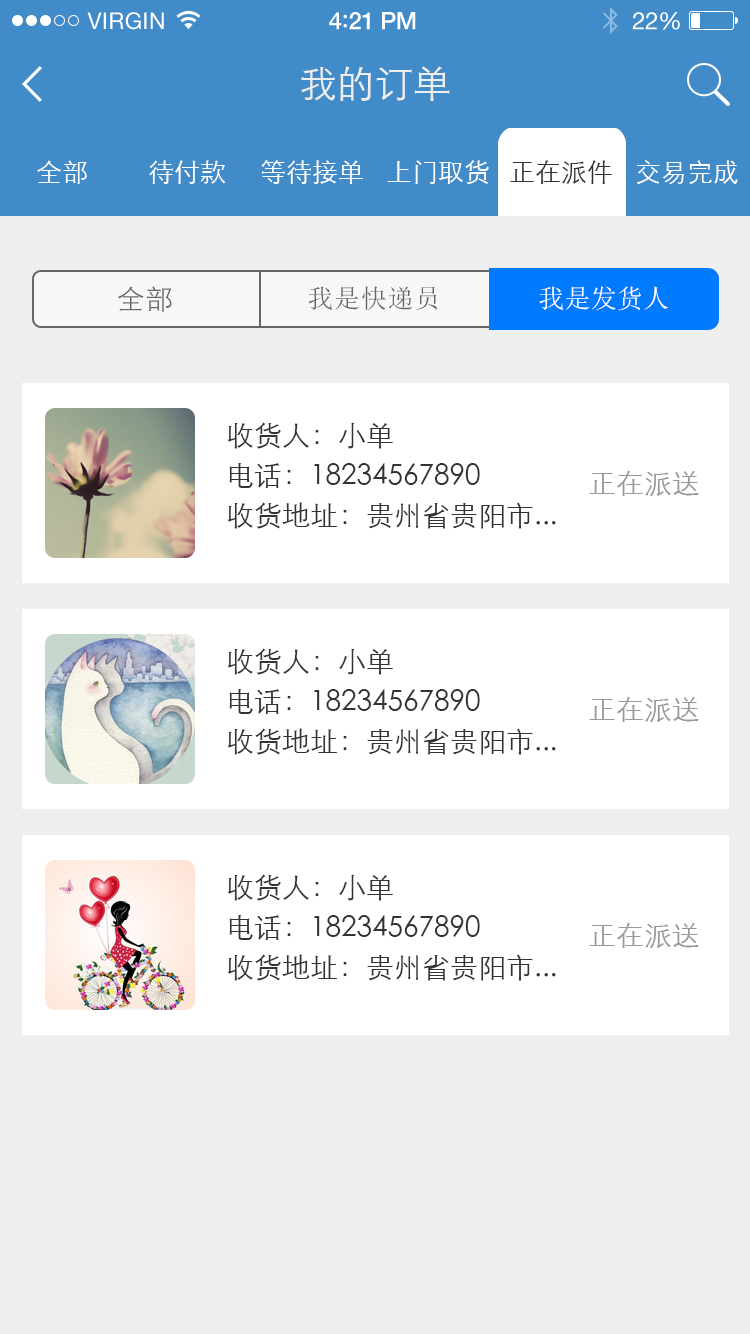
<style>
.page{position:relative;width:750px;height:1334px;background:#ffffff}
.page>*{position:absolute;margin:0}
.t1{font:23px "HelveticaNeue";letter-spacing:0.02em;color:#ffffff}
.t2{font:24px "HelveticaNeue-Medium";letter-spacing:-0.02em;color:#ffffff}
.t3{font:26px "Avenir-Medium";letter-spacing:-0.02em;color:#ffffff}
.t4{font:24px "HelveticaNeue";letter-spacing:-0.02em;color:#ffffff}
.t5{font:38px "STXihei";color:#eeeeee}
.t6{font:26px "STXihei";color:#ffffff}
.t7{font:26px "STXihei";color:#333333}
.t8{font:28px "STXihei";letter-spacing:0.02em;color:#666666}
.t9{font:26px "SimSun";letter-spacing:0.03em;color:#666666}
.t10{font:26px "SimSun";letter-spacing:0.01em;color:#ffffff}
.t11{font:28px/40px "STXihei";color:#333333}
.t12{font:28px "STXihei";color:#999999}
</style>
<div class="page">
<p class="t1" style="left:87px;top:12px;width:77px;height:18px">VIRGIN</p>
<p class="t2" style="left:329px;top:12px;width:87px;height:18px">4<span class="t3">:</span>21 PM</p>
<p class="t4" style="left:632px;top:12px;width:48px;height:18px">22%</p>
<p class="t5" style="left:301px;top:66px;width:149px;height:35px">我的订单</p>
<p class="t6" style="left:37px;top:160px;width:50px;height:24px">全部</p>
<p class="t6" style="left:149px;top:160px;width:77px;height:24px">待付款</p>
<p class="t6" style="left:261px;top:160px;width:102px;height:24px">等待接单</p>
<p class="t6" style="left:387px;top:160px;width:102px;height:24px">上门取货</p>
<p class="t7" style="left:510px;top:160px;width:102px;height:24px">正在派件</p>
<p class="t6" style="left:636px;top:160px;width:102px;height:24px">交易完成</p>
<p class="t8" style="left:117px;top:286px;width:55px;height:26px">全部</p>
<p class="t9" style="left:308px;top:286px;width:129px;height:24px">我是快递员</p>
<p class="t10" style="left:539px;top:286px;width:130px;height:25px">我是发货人</p>
<p class="t11" style="left:227px;top:422px;width:329px;height:107px">收货人：小单<br>电话：18234567890<br>收货地址：贵州省贵阳市...</p>
<p class="t12" style="left:589px;top:470px;width:110px;height:26px">正在派送</p>
<p class="t11" style="left:227px;top:648px;width:329px;height:107px">收货人：小单<br>电话：18234567890<br>收货地址：贵州省贵阳市...</p>
<p class="t12" style="left:589px;top:696px;width:110px;height:26px">正在派送</p>
<p class="t11" style="left:227px;top:874px;width:329px;height:107px">收货人：小单<br>电话：18234567890<br>收货地址：贵州省贵阳市...</p>
<p class="t12" style="left:589px;top:922px;width:110px;height:26px">正在派送</p>
</div>
